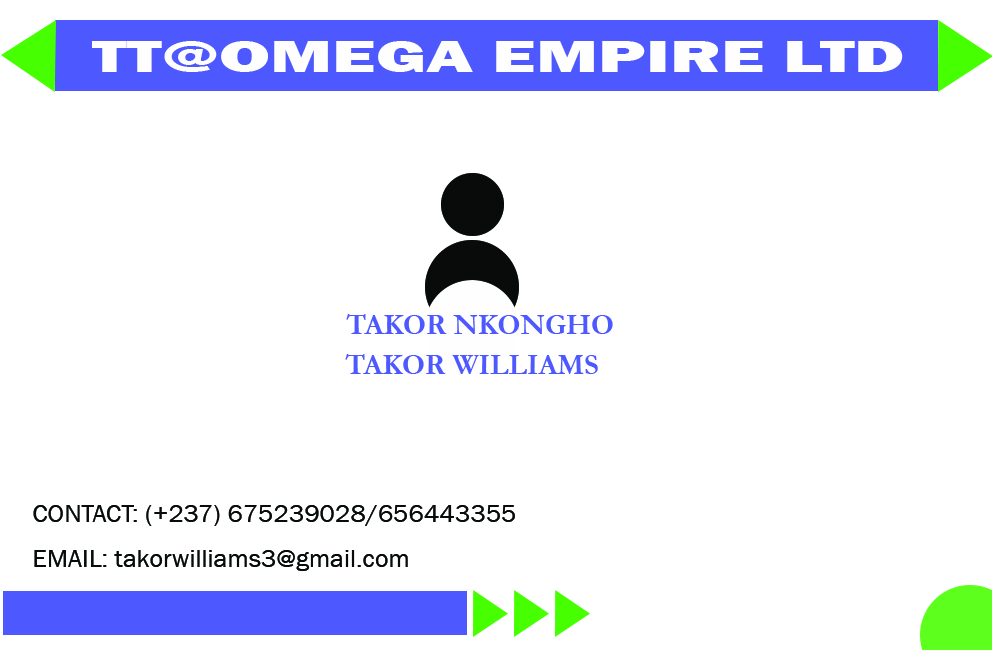
<style>
.page{position:relative;width:992px;height:650px;background:#ffffff}
.page>*{position:absolute;margin:0}
.t1{font:45.8px "FranklinGothic-Heavy";color:#fffeff;scale:1.62 1}
.t2{font:29.1px "Garamond-Bold";color:#4d58ff}
.t3{font:26.2px "FranklinGothic-Book";color:#090b0b}
</style>
<div class="page">
<p class="t1" style="left:92px;top:41px;width:811px;height:31px">TT@OMEGA EMPIRE LTD</p>
<p class="t2" style="left:346px;top:314px;width:267px;height:20px">TAKOR NKONGHO</p>
<p class="t2" style="left:345px;top:354px;width:253px;height:20px">TAKOR WILLIAMS</p>
<p class="t3" style="left:33px;top:505px;width:482px;height:21px">CONTACT: (+237) 675239028/656443355</p>
<p class="t3" style="left:34px;top:550px;width:374px;height:21px">EMAIL: takorwilliams3@gmail.com</p>
</div>
